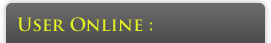
<style>
.page{position:relative;width:271px;height:43px}
.page>*{position:absolute;margin:0}
.t1{font:18px "TrajanPro-Bold";color:#e5f121}
</style>
<div class="page">
<p class="t1" style="left:17px;top:17px;width:135px;height:15px">User Online :</p>
</div>
